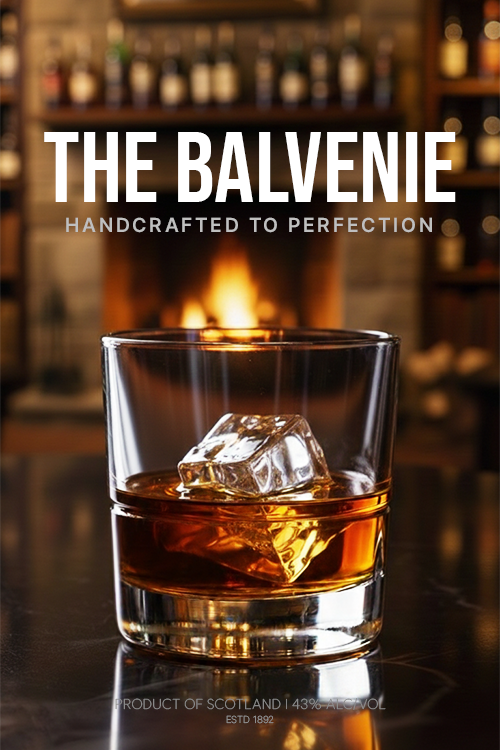
<style>
.page{position:relative;width:500px;height:750px}
.page>*{position:absolute;margin:0}
.t1{font:100px "BebasNeue-Regular";color:#ffffff;text-transform:uppercase}
.t2{font:20px "Pretendard-SemiBold";letter-spacing:0.12em;color:#bfbfbf;text-transform:uppercase}
.t3{font:14px "SUIT-ExtraLight";color:#8d8d8d;text-transform:uppercase}
.t4{font:10px "Pretendard-ExtraLight";color:#8d8d8d;text-transform:uppercase}
</style>
<div class="page">
<p class="t1" style="left:44px;top:132px;width:412px;height:70px">THE BALVENIE</p>
<p class="t2" style="left:66px;top:217px;width:366px;height:16px">Handcrafted to Perfection</p>
<p class="t3" style="left:115px;top:698px;width:271px;height:12px">Product of Scotland | 43% ALC/VOL</p>
<p class="t4" style="left:226px;top:715px;width:48px;height:9px">ESTD 1892</p>
</div>
